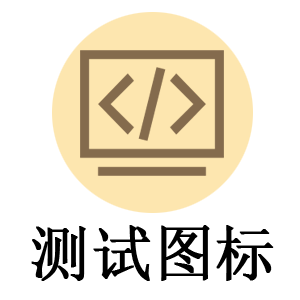
<style>
.page{position:relative;width:300px;height:300px;background:#ffffff}
.page>*{position:absolute;margin:0}
.t1{font:60px "SimSun";color:#000000;font-weight:bold}
</style>
<div class="page">
<p class="t1" style="left:31px;top:225px;width:243px;height:56px">测试图标</p>
</div>
